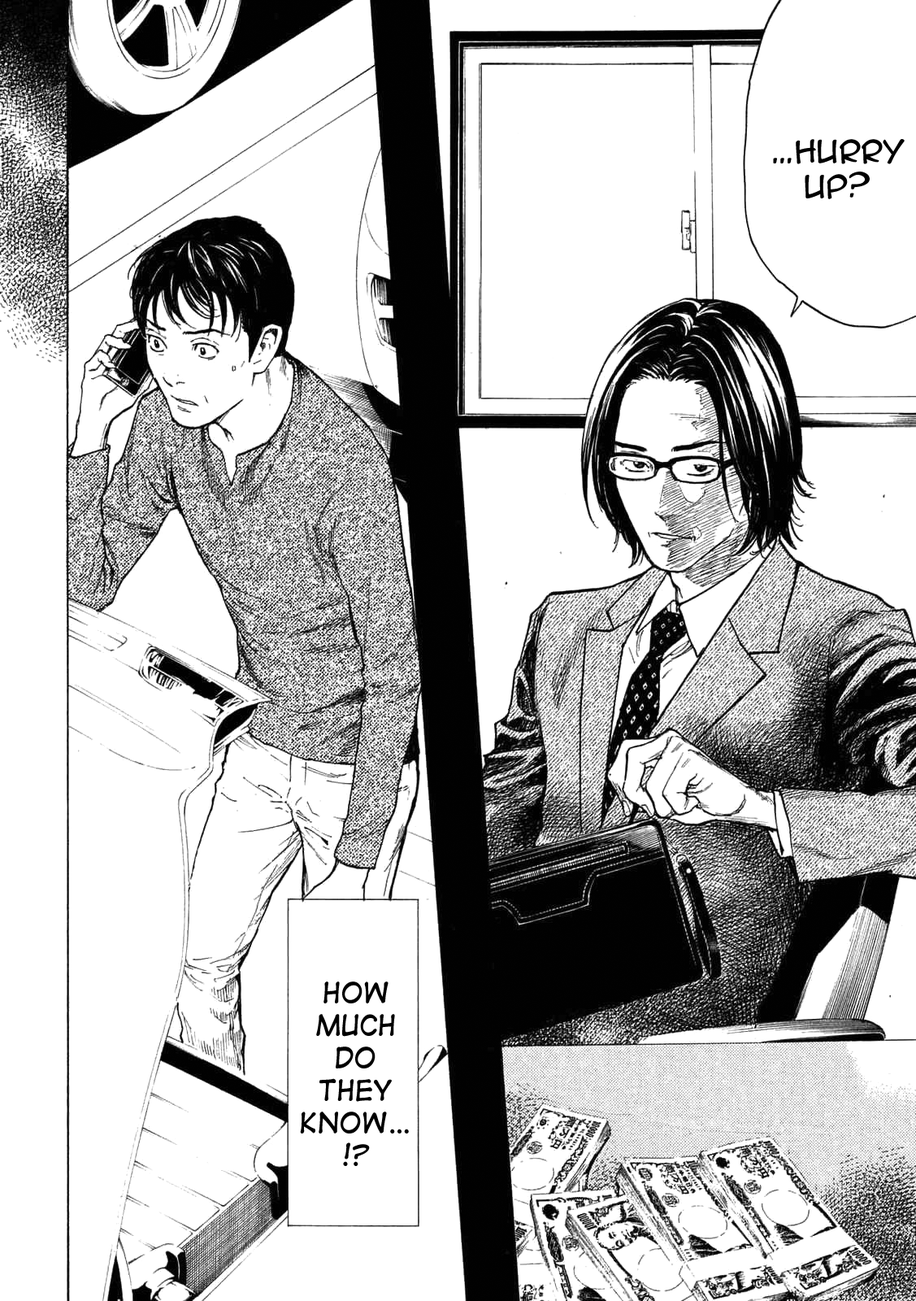
<style>
.page{position:relative;width:916px;height:1301px;background:#ffffff}
.page>*{position:absolute;margin:0}
.t1{font:29.3px "AnimeAce2.0BB";color:#000000}
.t2{font:27.1px "DigitalStrip";color:#000000}
</style>
<div class="page">
<p class="t1" style="left:773px;top:139px;width:132px;height:60px;text-align:center">…Hurry up?</p>
<p class="t2" style="left:300px;top:982px;width:109px;height:184px;text-align:center">How much <br>do they know…!?</p>
</div>
